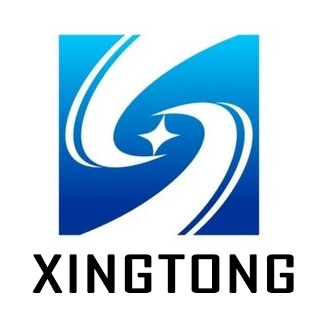
<style>
.page{position:relative;width:326px;height:323px;background:#ffffff}
.page>*{position:absolute;margin:0}
.t1{font:48px "AgencyFB-Reg";color:#010000;font-weight:bold;scale:1.68 1}
</style>
<div class="page">
<p class="t1" style="left:32px;top:254px;width:262px;height:39px">XINGTONG</p>
</div>
